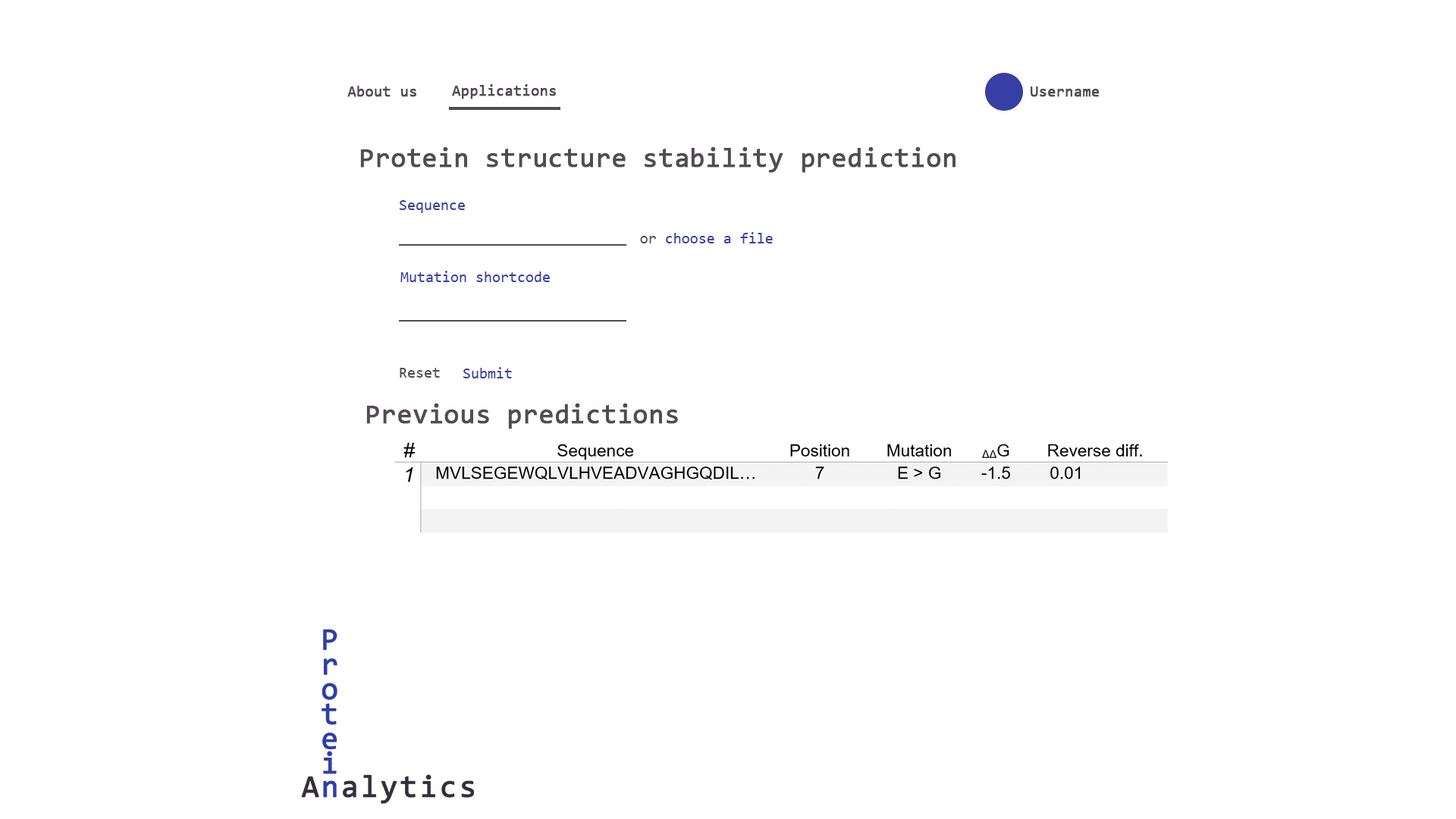
<style>
.page{position:relative;width:1456px;height:819px;background:#ffffff}
.page>*{position:absolute;margin:0}
.t1{font:15.2px "Consolas";color:#524b55;font-weight:bold}
.t2{font:27.3px "Consolas";color:#524b55;font-weight:bold}
.t3{font:15.2px "Consolas";color:#373fa6}
.t4{font:15.2px "Consolas";color:#524b55}
</style>
<div class="page">
<p class="t1" style="left:347px;top:86px;width:69px;height:11px">About us</p>
<p class="t1" style="left:452px;top:84px;width:104px;height:15px">Applications</p>
<p class="t1" style="left:1031px;top:86px;width:69px;height:11px">Username</p>
<p class="t2" style="left:360px;top:147px;width:595px;height:26px">Protein structure stability prediction</p>
<p class="t3" style="left:399px;top:200px;width:66px;height:13px">Sequence</p>
<p class="t3" style="left:640px;top:232px;width:133px;height:11px"><span class="t4">or </span>choose a file</p>
<p class="t3" style="left:400px;top:271px;width:150px;height:11px">Mutation shortcode</p>
<p class="t4" style="left:400px;top:368px;width:40px;height:10px">Reset</p>
<p class="t3" style="left:463px;top:367px;width:49px;height:11px">Submit</p>
<p class="t2" style="left:366px;top:403px;width:312px;height:26px">Previous predictions</p>
</div>
